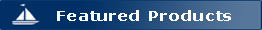
<style>
.page{position:relative;width:262px;height:30px;background:#003066}
.page>*{position:absolute;margin:0}
.t1{font:14px "Verdana-Bold";letter-spacing:0.025em;color:#ffffff;scale:1.19 1}
</style>
<div class="page">
<p class="t1" style="left:57px;top:10px;width:174px;height:11px">Featured Products</p>
</div>
